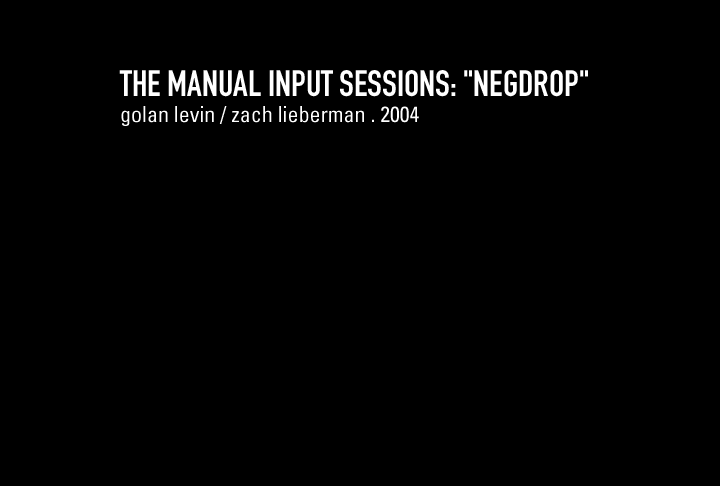
<style>
.page{position:relative;width:720px;height:486px;background:#000000}
.page>*{position:absolute;margin:0}
.t1{font:36px "DINEngschrift";color:#ffffff}
.t2{font:22px "Univers-Condensed";color:#ffffff}
</style>
<div class="page">
<p class="t1" style="left:119px;top:70px;width:469px;height:56px">THE MANUAL INPUT SESSIONS: "NEGDROP"<br><span class="t2">golan levin / zach lieberman . 2004</span></p>
</div>
